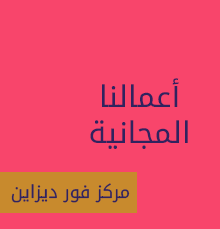
<style>
.page{position:relative;width:220px;height:229px;background:#f8456b}
.page>*{position:absolute;margin:0}
.t1{font:30px "DroidArabicKufi";color:#30235f}
.t2{font:18px "DroidArabicKufi";color:#30235f}
</style>
<div class="page">
<p class="t1" style="left:90px;top:78px;width:98px;height:71px;text-align:center">أعمالنا<br>المجانية</p>
<p class="t2" style="left:11px;top:183px;width:119px;height:20px">مركز فور ديزاين</p>
</div>
